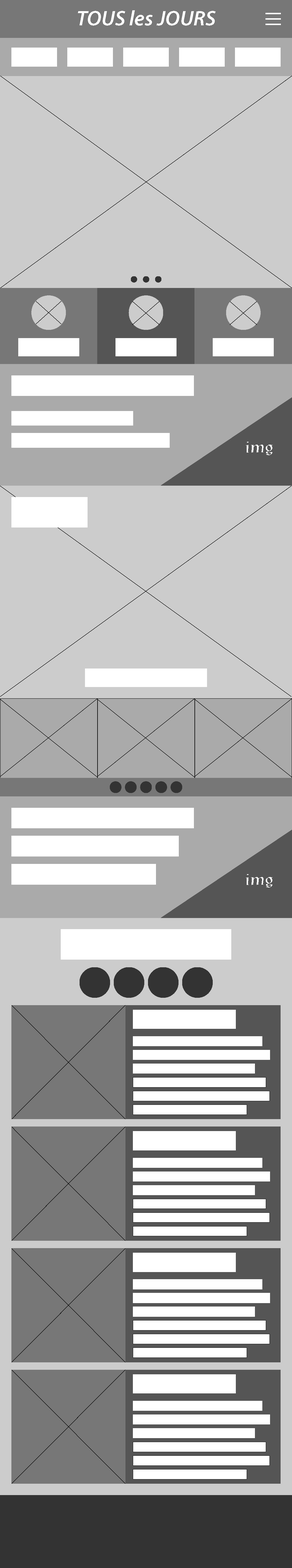
<style>
.page{position:relative;width:292px;height:1568px;background:#cccccc}
.page>*{position:absolute;margin:0}
.t1{font:21.3px "MyriadPro-SemiboldIt";color:#ffffff}
</style>
<div class="page">
<p class="t1" style="left:78px;top:10px;width:137px;height:16px">TOUS les JOURS</p>
</div>
